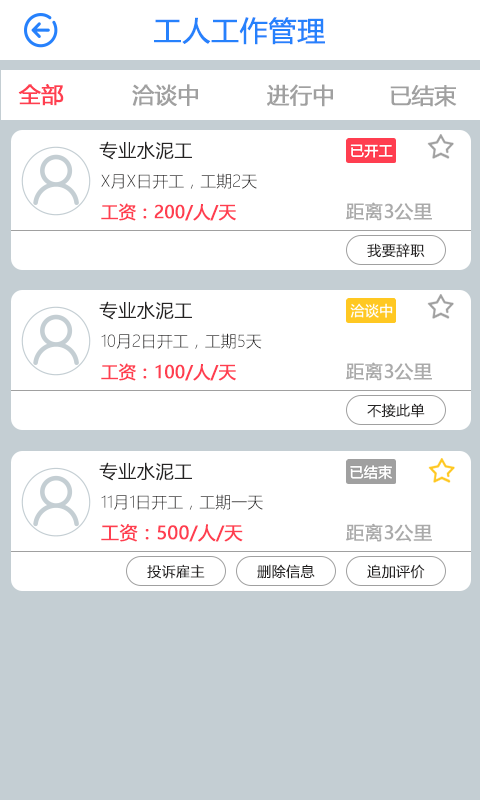
<style>
.page{position:relative;width:480px;height:800px;background:#ffffff}
.page>*{position:absolute;margin:0}
.t1{font:28px "MicrosoftYaHei";color:#2681fc;font-weight:bold}
.t2{font:22px "MicrosoftYaHei";color:#ff3e50;font-weight:bold}
.t3{font:22px "MicrosoftYaHei";color:#a0a0a0;font-weight:bold}
.t4{font:18.3px "MicrosoftYaHeiLight";color:#252323;font-weight:bold}
.t5{font:16px "MicrosoftYaHeiLight";color:#252323}
.t6{font:17.1px "MicrosoftYaHei";color:#ff3e50;font-weight:bold}
.t7{font:18.3px "MicrosoftYaHei";color:#aaaaaa;font-weight:bold}
.t8{font:14px "MicrosoftYaHeiLight";color:#252323;font-weight:bold}
.t9{font:18px "MicrosoftYaHei";color:#ff3e50;font-weight:bold}
</style>
<div class="page">
<p class="t1" style="left:154px;top:17px;width:171px;height:28px">工人工作管理</p>
<p class="t2" style="left:18px;top:84px;width:46px;height:22px">全部</p>
<p class="t3" style="left:132px;top:84px;width:66px;height:22px">洽谈中</p>
<p class="t3" style="left:267px;top:84px;width:66px;height:23px">进行中</p>
<p class="t3" style="left:390px;top:85px;width:67px;height:22px">已结束</p>
<p class="t4" style="left:99px;top:141px;width:93px;height:19px">专业水泥工</p>
<p class="t5" style="left:101px;top:173px;width:156px;height:16px">X月X日开工，工期2天</p>
<p class="t6" style="left:101px;top:203px;width:135px;height:18px">工资：200/人/天</p>
<p class="t7" style="left:346px;top:202px;width:86px;height:19px">距离3公里</p>
<p class="t8" style="left:367px;top:243px;width:58px;height:15px">我要辞职</p>
<p class="t4" style="left:99px;top:301px;width:93px;height:19px">专业水泥工</p>
<p class="t5" style="left:101px;top:333px;width:161px;height:16px">10月2日开工，工期5天</p>
<p class="t6" style="left:101px;top:363px;width:135px;height:18px">工资：100/人/天</p>
<p class="t7" style="left:346px;top:362px;width:86px;height:19px">距离3公里</p>
<p class="t8" style="left:367px;top:403px;width:58px;height:15px">不接此单</p>
<p class="t4" style="left:99px;top:462px;width:93px;height:19px">专业水泥工</p>
<p class="t5" style="left:101px;top:494px;width:162px;height:16px">11月1日开工，工期一天</p>
<p class="t9" style="left:101px;top:524px;width:142px;height:18px">工资：500/人/天</p>
<p class="t7" style="left:346px;top:523px;width:86px;height:19px">距离3公里</p>
<p class="t8" style="left:147px;top:564px;width:58px;height:15px">投诉雇主</p>
<p class="t8" style="left:257px;top:564px;width:58px;height:15px">删除信息</p>
<p class="t8" style="left:367px;top:564px;width:58px;height:15px">追加评价</p>
</div>
